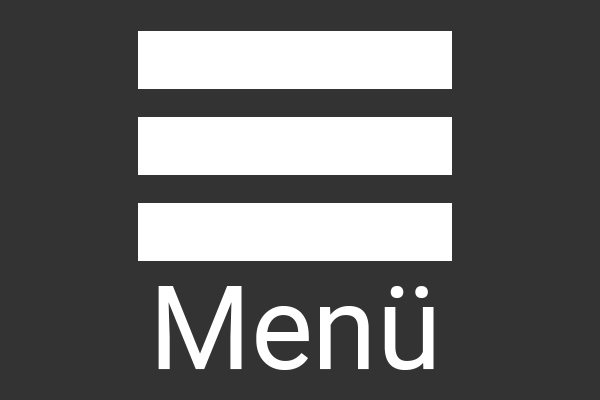
<style>
.page{position:relative;width:600px;height:400px;background:#333333}
.page>*{position:absolute;margin:0}
.t1{font:116.6px "Roboto-Regular";color:#ffffff}
</style>
<div class="page">
<p class="t1" style="left:158px;top:286px;width:276px;height:84px">Menü</p>
</div>
